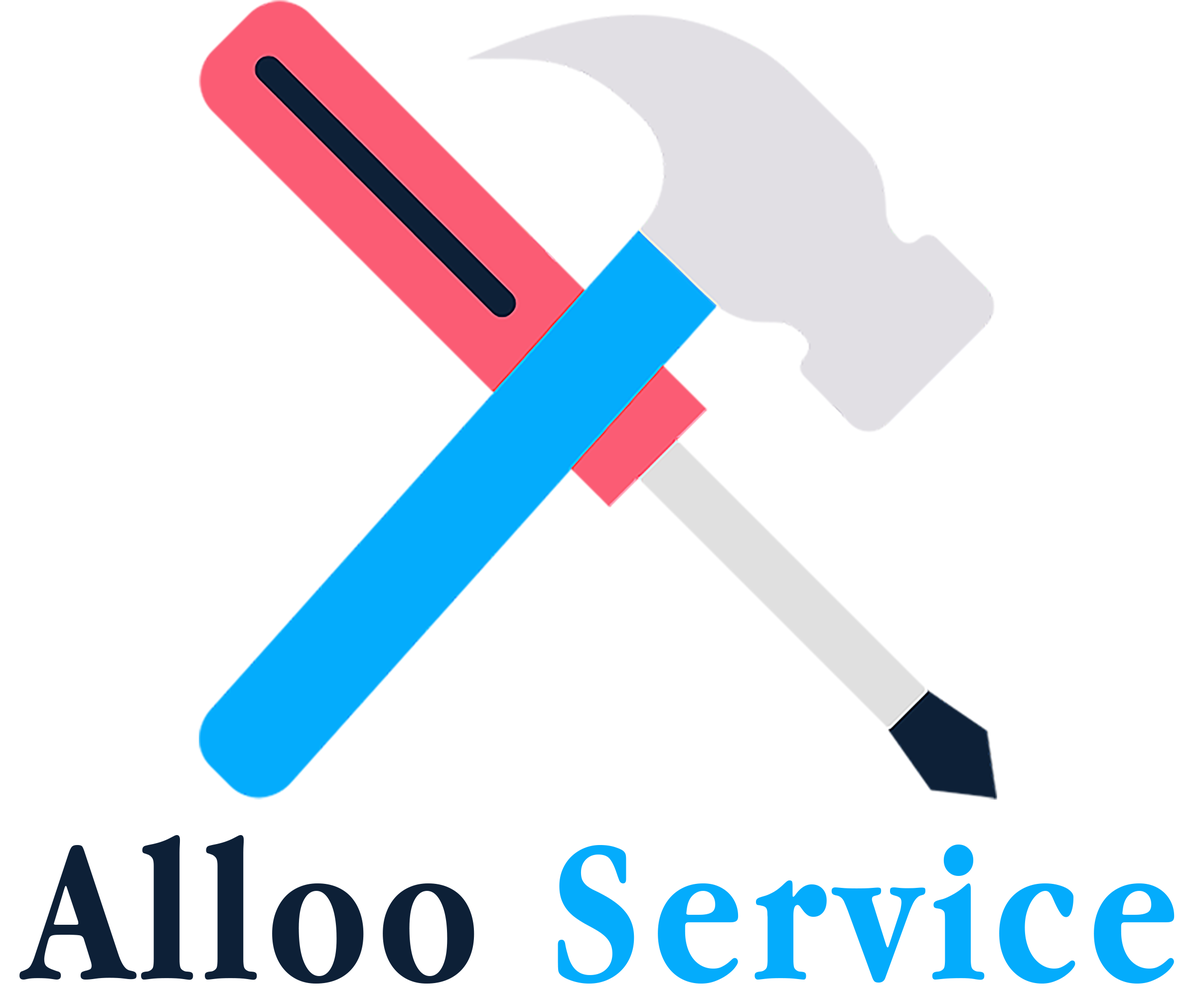
<style>
.page{position:relative;width:1196px;height:997px;background:#ffffff}
.page>*{position:absolute;margin:0}
.t1{font:207.7px "AppleGaramond-Bold";letter-spacing:0.05em;color:#04acfc}
.t2{font:207.7px "AppleGaramond-Bold";letter-spacing:0.05em;color:#0d2037}
</style>
<div class="page">
<p class="t1" style="left:19px;top:835px;width:1155px;height:149px"><span class="t2">Alloo </span>Service</p>
</div>
